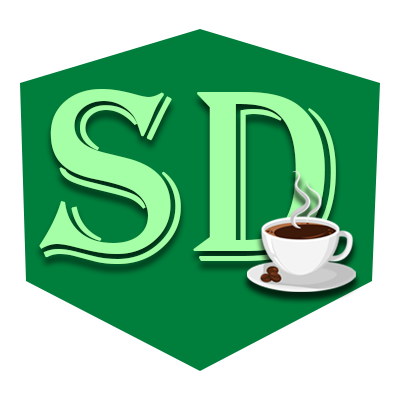
<style>
.page{position:relative;width:400px;height:400px;background:#ffffff}
.page>*{position:absolute;margin:0}
.t1{font:251.4px "Algerian";color:#a4ffa6;font-weight:bold}
</style>
<div class="page">
<p class="t1" style="left:39px;top:89px;width:297px;height:175px">SD</p>
</div>
